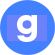
<style>
.page{position:relative;width:55px;height:55px;background:#4280fd}
.page>*{position:absolute;margin:0}
.t1{font:33.3px "ITCAvantGardeStd-Bold";letter-spacing:-0.02em;color:#ffffff}
</style>
<div class="page">
<p class="t1" style="left:17px;top:15px;width:20px;height:27px">g</p>
</div>
